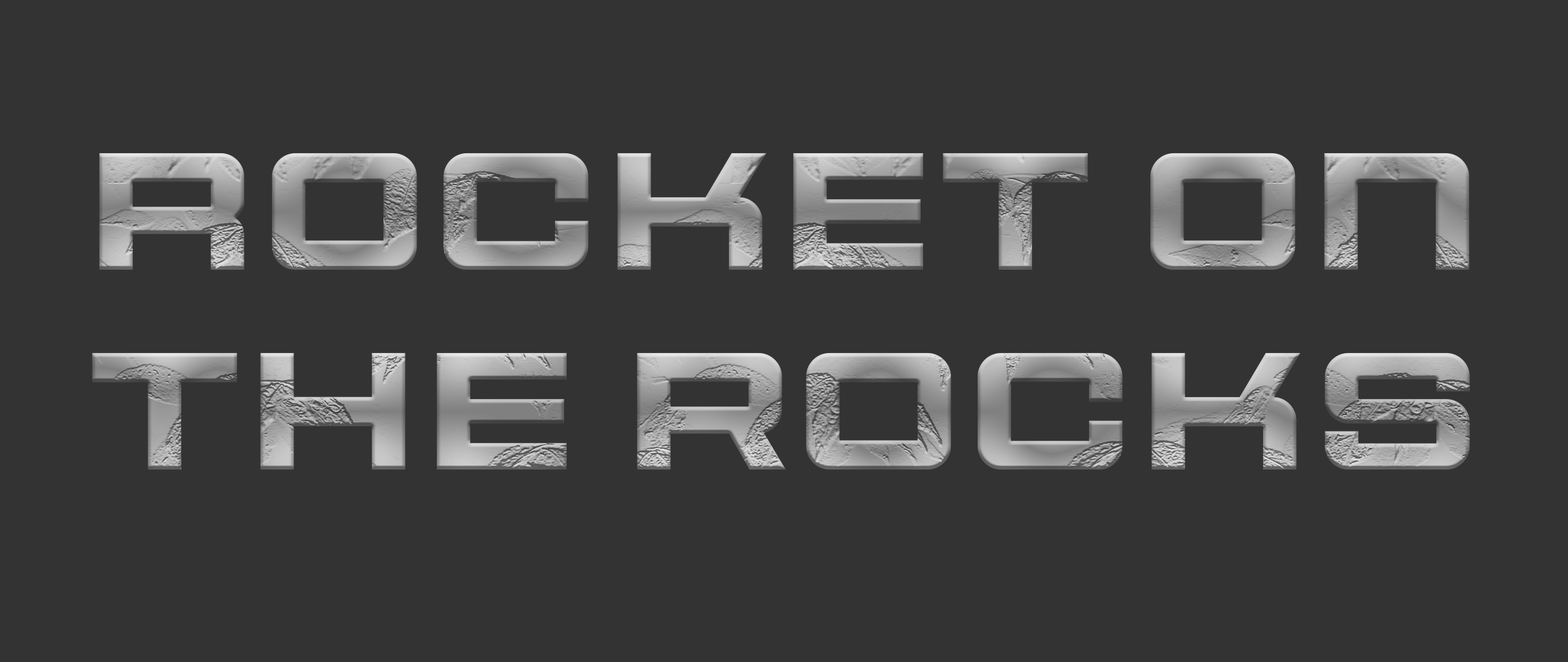
<style>
.page{position:relative;width:1568px;height:662px;background:#333333}
.page>*{position:absolute;margin:0}
.t1{font:166.3px "SportyPro-BoldXP"}
</style>
<div class="page">
<p class="t1" style="left:92px;top:153px;width:1378px;height:316px;text-align:center">Rocket on<br>the rocks</p>
</div>
